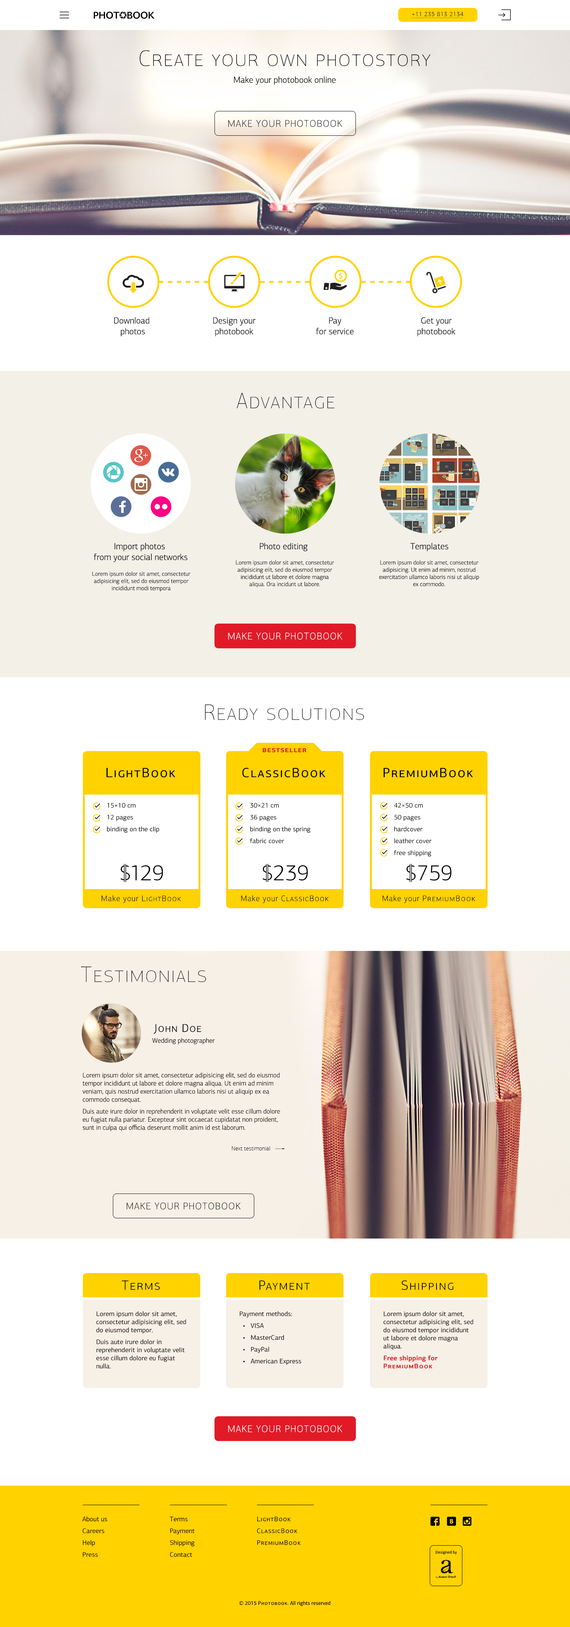
<style>
.page{position:relative;width:570px;height:1627px;background:#ffffff}
.page>*{position:absolute;margin:0}
.t1{font:6px/0px "PFAgoraSansPro-Light";letter-spacing:0.06em;color:#212121;text-transform:uppercase}
.t2{font:6px "PFAgoraSansPro-Light";letter-spacing:0.06em;color:#212121;text-transform:uppercase}
.t3{font:22.5px "PFAgoraSansPro-XThin";letter-spacing:0.06em;color:#000000;font-variant:small-caps}
.t4{font:9px "PFAgoraSansPro-Light";color:#000000}
.t5{font:9.8px "PFAgoraSansPro-Thin";letter-spacing:0.06em;color:#212121;text-transform:uppercase}
.t6{font:6px "PFAgoraSansPro-Light";color:#000000}
.t7{font:9.8px "PFAgoraSansPro-Thin";letter-spacing:0.06em;color:#ffffff;text-transform:uppercase}
.t8{font:7.8px "PFAgoraSansPro-Bold";letter-spacing:0.06em;color:#e11a27;font-variant:small-caps}
.t9{font:13.5px "PFAgoraSansPro-Regular";letter-spacing:0.08em;color:#000000;font-variant:small-caps}
.t10{font:6.8px "PFAgoraSansPro-Regular";color:#000000}
.t11{font:22.5px "PFAgoraSansPro-Light";letter-spacing:-0.06em;color:#000000}
.t12{font:22.5px "PFAgoraSansPro-Light";color:#000000}
.t13{font:8.1px "PFAgoraSansPro-Thin";letter-spacing:0.06em;color:#000000}
.t14{font:8.1px "PFAgoraSansPro-Thin";letter-spacing:0.08em;color:#000000;font-variant:small-caps}
.t15{font:8.1px "PFAgoraSansPro-Thin";letter-spacing:0.1em;color:#000000;font-variant:small-caps}
.t16{font:11.2px "PFAgoraSansPro-Light";letter-spacing:0.06em;color:#000000;font-variant:small-caps}
.t17{font:6.8px "PFAgoraSansPro-Light";color:#000000}
.t18{font:6px "PFAgoraSansPro-Thin";color:#000000}
.t19{font:13.5px "PFAgoraSansPro-Light";letter-spacing:0.08em;color:#000000;font-variant:small-caps}
.t20{font:6.8px "PFAgoraSansPro-Bold";color:#e11a27}
.t21{font:6.8px "PFAgoraSansPro-Bold";letter-spacing:0.08em;color:#e11a27;font-variant:small-caps}
.t22{font:6.8px "PFAgoraSansPro-Regular";letter-spacing:0.06em;color:#000000;font-variant:small-caps}
.t23{font:4.2px "PFAgoraSansPro-Regular";color:#000000}
.t24{font:5.3px "PFAgoraSansPro-Regular";color:#000000}
.t25{font:5.3px "PFAgoraSansPro-Regular";letter-spacing:0.08em;color:#000000;font-variant:small-caps}
</style>
<div class="page">
<p class="t1" style="left:412px;top:12px;width:52px;height:6px"><span class="t2">+11 235 813 2134<br></span>....................................</p>
<p class="t3" style="left:140px;top:50px;width:291px;height:16px">Create your own photostory</p>
<p class="t4" style="left:234px;top:76px;width:102px;height:9px">Make your photobook online</p>
<p class="t5" style="left:228px;top:120px;width:114px;height:7px">make your photobook</p>
<p class="t4" style="left:114px;top:317px;width:35px;height:19px;text-align:center">Download <br>photos</p>
<p class="t4" style="left:213px;top:317px;width:43px;height:19px;text-align:center">Design your<br>photobook</p>
<p class="t4" style="left:316px;top:317px;width:38px;height:18px;text-align:center">Pay<br>for service</p>
<p class="t4" style="left:417px;top:317px;width:39px;height:19px;text-align:center">Get your<br>photobook</p>
<p class="t3" style="left:237px;top:393px;width:98px;height:15px">Advantage</p>
<p class="t4" style="left:94px;top:543px;width:94px;height:19px;text-align:center">Import photos <br>from your social networks</p>
<p class="t4" style="left:260px;top:543px;width:48px;height:9px">Photo editing</p>
<p class="t4" style="left:410px;top:543px;width:39px;height:8px">Templates</p>
<p class="t6" style="left:236px;top:560px;width:98px;height:28px;text-align:center">Lorem ipsum dolor sit amet, consectetur adipisicing elit, sed do eiusmod tempor incididunt ut labore et dolore magna aliqua. Ora incidunt ut labore.</p>
<p class="t6" style="left:379px;top:560px;width:100px;height:27px;text-align:center">Lorem ipsum dolor sit amet, consectetur adipisicing. Ut enim ad minim, nostrud exercitation ullamco laboris nisi ut aliquip ex commodo.</p>
<p class="t6" style="left:92px;top:572px;width:99px;height:20px;text-align:center">Lorem ipsum dolor sit amet, consectetur adipisicing elit, sed do eiusmod tempor incididunt modi tempora</p>
<p class="t7" style="left:228px;top:633px;width:114px;height:7px">make your photobook</p>
<p class="t3" style="left:205px;top:704px;width:159px;height:16px">Ready solutions</p>
<p class="t8" style="left:263px;top:748px;width:43px;height:5px">bestseller</p>
<p class="t9" style="left:107px;top:768px;width:69px;height:9px">LightBook</p>
<p class="t9" style="left:242px;top:768px;width:84px;height:9px">ClassicBook</p>
<p class="t9" style="left:384px;top:768px;width:89px;height:9px">PremiumBook</p>
<p class="t10" style="left:107px;top:803px;width:52px;height:30px">15×10 cm<br>      12 pages<br>      binding on the clip</p>
<p class="t10" style="left:250px;top:803px;width:61px;height:40px">30×21 cm<br>      36 pages<br>      binding on the spring<br>      fabric cover</p>
<p class="t10" style="left:394px;top:803px;width:38px;height:54px">42×50 cm<br>      50 pages<br>      hardcover<br>      leather cover<br>      free shipping</p>
<p class="t11" style="left:120px;top:864px;width:43px;height:18px">$1<span class="t12">29</span></p>
<p class="t12" style="left:263px;top:864px;width:45px;height:18px">$239</p>
<p class="t12" style="left:406px;top:864px;width:46px;height:18px">$759</p>
<p class="t13" style="left:102px;top:895px;width:79px;height:8px">Make your <span class="t14">LightBook</span></p>
<p class="t14" style="left:241px;top:895px;width:88px;height:8px"><span class="t13">Make your </span>ClassicBook</p>
<p class="t15" style="left:383px;top:895px;width:92px;height:8px"><span class="t13">Make your </span>PremiumBook</p>
<p class="t3" style="left:81px;top:966px;width:125px;height:16px">Testimonials</p>
<p class="t16" style="left:153px;top:1024px;width:48px;height:10px">John Doe</p>
<p class="t17" style="left:152px;top:1038px;width:63px;height:6px">Wedding photographer</p>
<p class="t17" style="left:83px;top:1073px;width:197px;height:58px">Lorem ipsum dolor sit amet, consectetur adipisicing elit, sed do eiusmod tempor incididunt ut labore et dolore magna aliqua. Ut enim ad minim veniam, quis nostrud exercitation ullamco laboris nisi ut aliquip ex ea commodo consequat. <br>Duis aute irure dolor in reprehenderit in voluptate velit esse cillum dolore eu fugiat nulla pariatur. Excepteur sint occaecat cupidatat non proident, sunt in culpa qui officia deserunt mollit anim id est laborum.</p>
<p class="t18" style="left:232px;top:1146px;width:38px;height:5px">Next testimonial</p>
<p class="t5" style="left:126px;top:1203px;width:115px;height:7px">make your photobook</p>
<p class="t19" style="left:122px;top:1281px;width:38px;height:9px">Terms</p>
<p class="t19" style="left:260px;top:1281px;width:50px;height:9px">Payment</p>
<p class="t19" style="left:401px;top:1280px;width:52px;height:10px">Shipping</p>
<p class="t10" style="left:96px;top:1311px;width:90px;height:58px">Lorem ipsum dolor sit amet, consectetur adipisicing elit, sed do eiusmod tempor.<br>Duis aute irure dolor in reprehenderit in voluptate velit esse cillum dolore eu fugiat nulla.</p>
<p class="t10" style="left:240px;top:1311px;width:62px;height:54px">Payment methods:<br>  •   VISA <br>  •   MasterCard <br>  •   PayPal<br>  •   American Express</p>
<p class="t10" style="left:383px;top:1311px;width:90px;height:58px">Lorem ipsum dolor sit amet, consectetur adipisicing elit, sed do eiusmod tempor incididunt ut labore et dolore magna aliqua.<br><span class="t20">Free shipping for </span><span class="t21">PremiumBook</span></p>
<p class="t7" style="left:228px;top:1425px;width:114px;height:8px">make your photobook</p>
<p class="t10" style="left:82px;top:1517px;width:25px;height:40px">About us<br>Careers<br>Help<br>Press</p>
<p class="t10" style="left:170px;top:1517px;width:25px;height:40px">Terms<br>Payment<br>Shipping<br>Contact</p>
<p class="t22" style="left:257px;top:1517px;width:44px;height:28px">LightBook<br>ClassicBook<br>PremiumBook</p>
<p class="t23" style="left:436px;top:1551px;width:21px;height:4px">Designed by</p>
<p class="t24" style="left:239px;top:1601px;width:91px;height:5px">© 2015 <span class="t25">Photobook</span>. All rights reserved</p>
</div>
